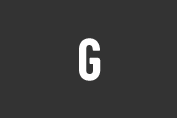
<style>
.page{position:relative;width:177px;height:118px;background:#333333}
.page>*{position:absolute;margin:0}
.t1{font:58.3px "Phenomena-ExtraBold";color:#fffefe}
</style>
<div class="page">
<p class="t1" style="left:79px;top:38px;width:22px;height:43px">G</p>
</div>
